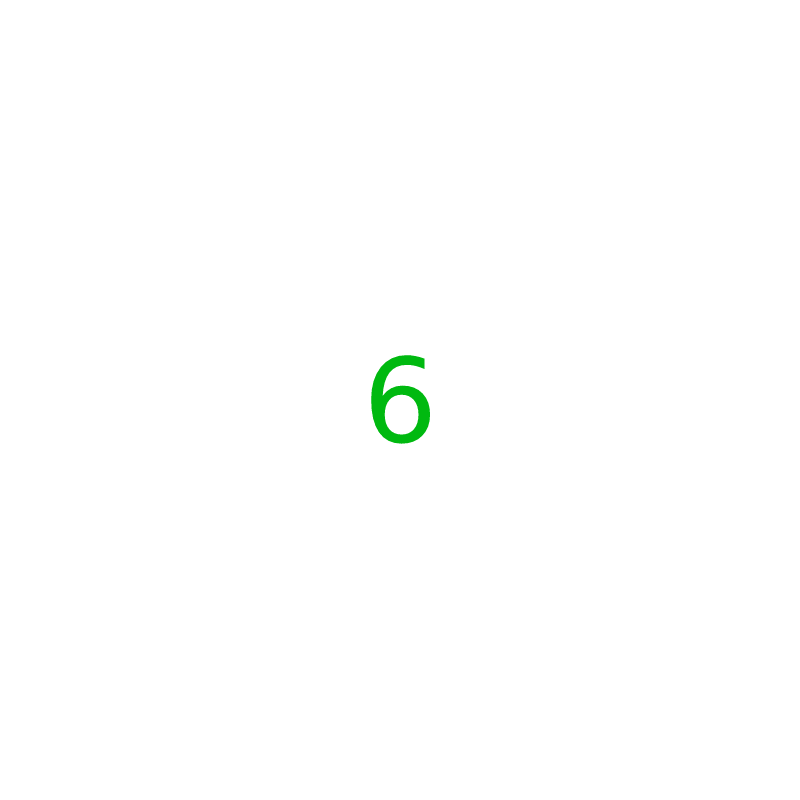
<style>
.page{position:relative;width:800px;height:800px;background:#ffffff}
.page>*{position:absolute;margin:0}
.t1{font:117px "DejaVuSans";color:#00b910}
</style>
<div class="page">
<p class="t1" style="left:371px;top:355px;width:60px;height:89px">6</p>
</div>
